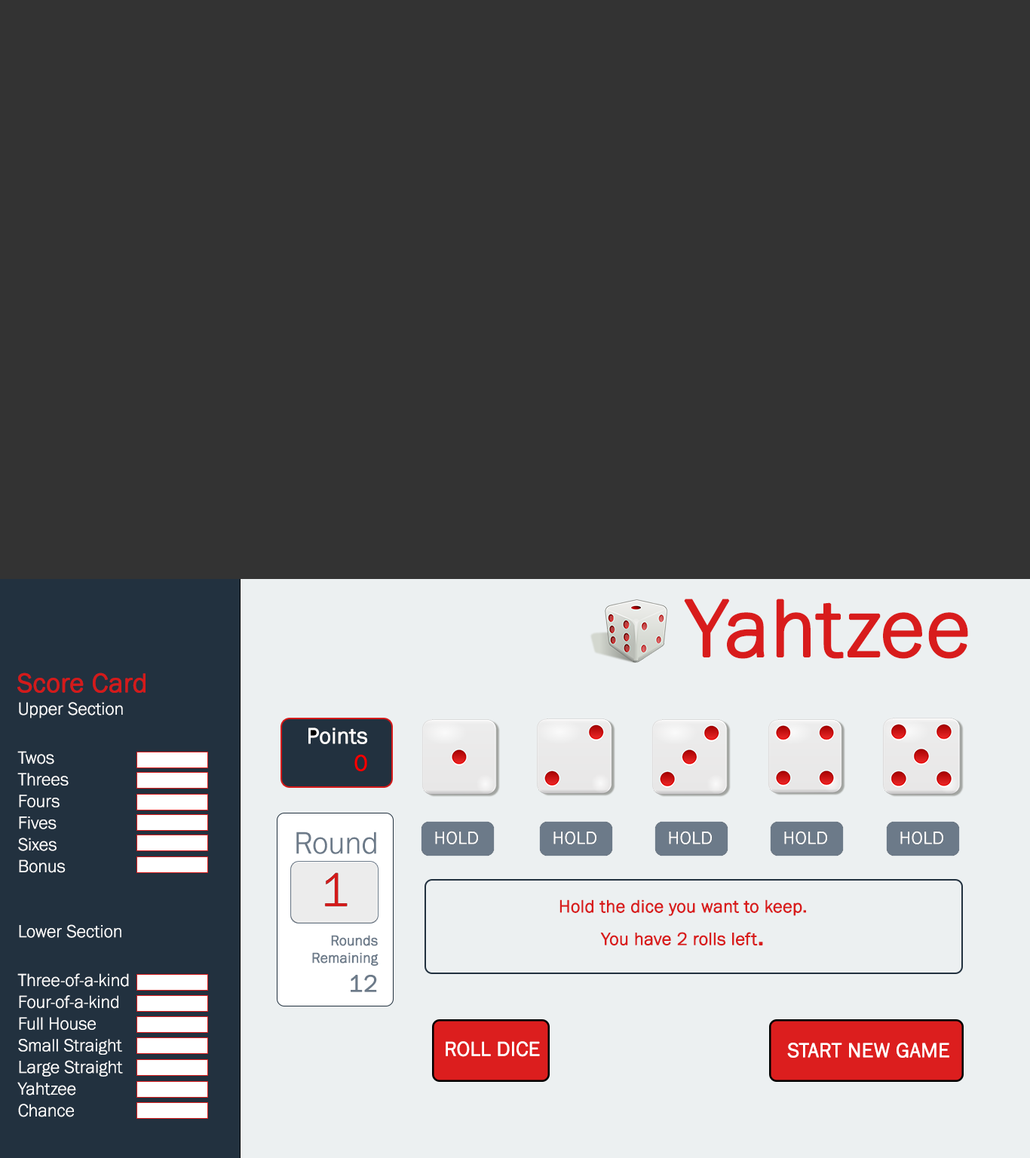
<style>
.page{position:relative;width:1030px;height:1158px;background:#333333}
.page>*{position:absolute;margin:0}
.t1{font:83.8px "FranklinGothicURW-Lig";color:#d81c1c;font-weight:bold}
.t2{font:27.1px "FranklinGothicURW-Lig";color:#d41a1a;font-weight:bold}
.t3{font:18.1px "FranklinGothicURW-Lig";color:#fefefe}
.t4{font:22.6px "FranklinGothicURW-Lig";color:#fefefe}
.t5{font:22.6px "FranklinGothicURW-Lig";color:#ffffff;font-weight:bold}
.t6{font:22.6px "FranklinGothicURW-Lig";color:#ff0000;font-weight:bold}
.t7{font:31.8px "FranklinGothicURW-Lig";color:#6c7a89}
.t8{font:48.2px "FranklinGothicURW-Lig";color:#d41a1a}
.t9{font:18.1px "FranklinGothicURW-Lig";color:#d81c1c;font-weight:bold}
.t10{font:27.1px "FranklinGothicURW-Lig";color:#d81c1c;font-weight:bold}
.t11{font:14.5px "FranklinGothicURW-Lig";color:#6c7a89;font-weight:bold}
.t12{font:24.1px "FranklinGothicURW-Lig";color:#6c7a89;font-weight:bold}
.t13{font:20.5px "FranklinGothicURW-Lig";color:#ffffff;font-weight:bold}
</style>
<div class="page">
<p class="t1" style="left:684px;top:599px;width:284px;height:60px">Yahtzee</p>
<p class="t2" style="left:17px;top:672px;width:128px;height:21px">Score Card</p>
<p class="t3" style="left:17px;top:702px;width:112px;height:415px"><span class="t4"><br></span>Upper Section<br><br>Twos<br>Threes<br>Fours<br>Fives<br>Sixes<br>Bonus<br><br><br>Lower Section<br><br>Three-of-a-kind<br>Four-of-a-kind<br>Full House<br>Small Straight<br>Large Straight<br>Yahtzee<br>Chance</p>
<p class="t5" style="left:308px;top:727px;width:59px;height:44px;text-align:right">Points<br><span class="t6">0</span></p>
<p class="t7" style="left:296px;top:832px;width:80px;height:22px">Round</p>
<p class="t8" style="left:325px;top:873px;width:22px;height:33px">1</p>
<p class="t9" style="left:559px;top:899px;width:247px;height:47px;text-align:center">Hold the dice you want to keep.<br>You have 2 rolls left<span class="t10">.</span></p>
<p class="t11" style="left:312px;top:935px;width:66px;height:57px;text-align:right">Rounds<br>Remaining<br><span class="t12">12</span></p>
<p class="t13" style="left:446px;top:1041px;width:94px;height:16px">ROLL DICE</p>
<p class="t13" style="left:787px;top:1043px;width:162px;height:15px">START NEW GAME</p>
</div>
